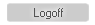
<style>
.page{position:relative;width:95px;height:25px;background:#ffffff}
.page>*{position:absolute;margin:0}
.t1{font:8px "ASI_System";color:#545454}
</style>
<div class="page">
<p class="t1" style="left:34px;top:8px;width:29px;height:11px">Logoff</p>
</div>
